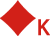
<style>
.page{position:relative;width:52px;height:36px;background:#ffffff}
.page>*{position:absolute;margin:0}
.t1{font:23.4px "MyriadPro-Regular";letter-spacing:-0.1em;color:#d22018;font-weight:bold}
</style>
<div class="page">
<p class="t1" style="left:38px;top:19px;width:12px;height:17px">K</p>
</div>
